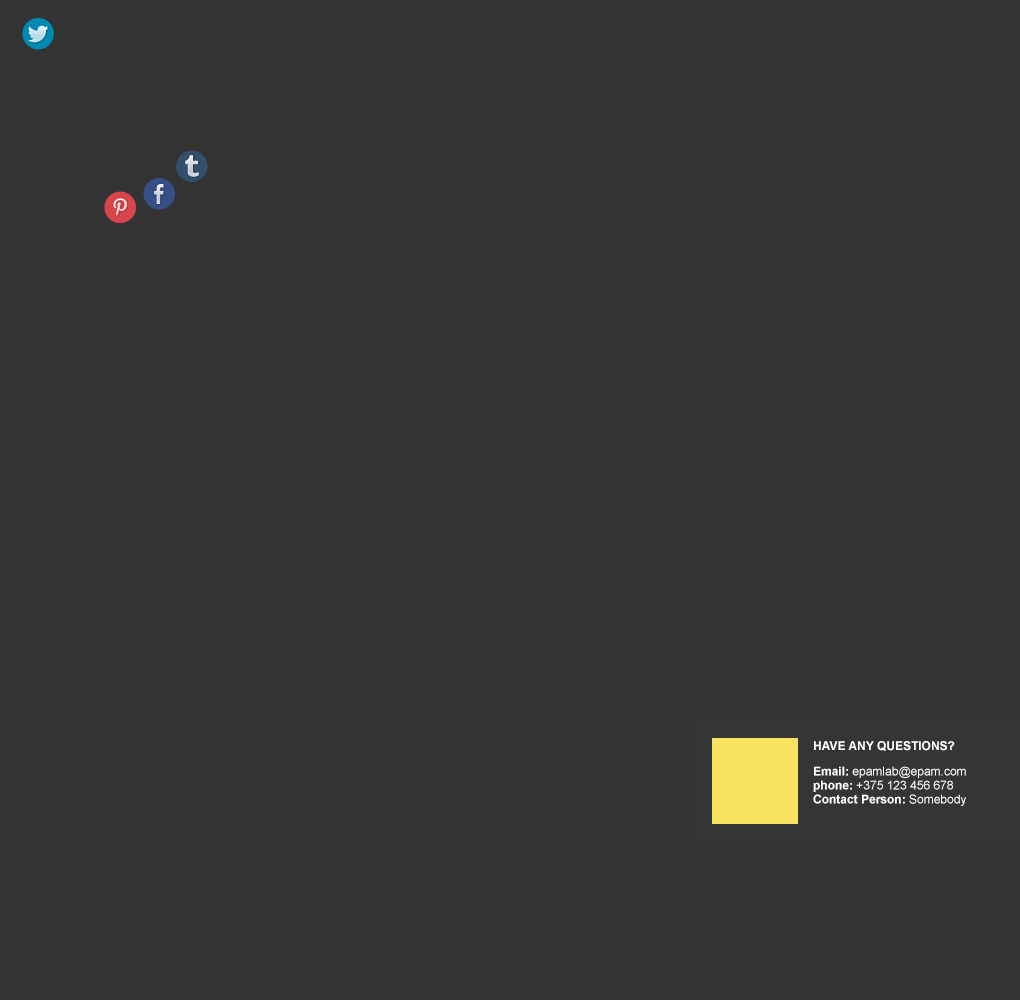
<style>
.page{position:relative;width:1020px;height:1000px;background:#333333}
.page>*{position:absolute;margin:0}
.t1{font:12px "Arial-BoldMT";color:#ffffff;text-transform:uppercase}
.t2{font:12px/14px "ArialMT";color:#ffffff}
.t3{font:12px/14px "Arial-BoldMT";color:#ffffff}
</style>
<div class="page">
<p class="t1" style="left:814px;top:741px;width:141px;height:10px">Have any questions?</p>
<p class="t2" style="left:813px;top:766px;width:153px;height:40px"><span class="t3">Email: </span>epamlab@epam.com<br><span class="t3">phone: </span>+375 123 456 678<br><span class="t3">Contact Person: </span>Somebody</p>
</div>
